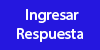
<style>
.page{position:relative;width:100px;height:50px;background:#2517df}
.page>*{position:absolute;margin:0}
.t1{font:16px "MyriadHebrew-Regular";color:#ffffff}
</style>
<div class="page">
<p class="t1" style="left:17px;top:9px;width:66px;height:33px;text-align:center">Ingresar <br>Respuesta</p>
</div>
